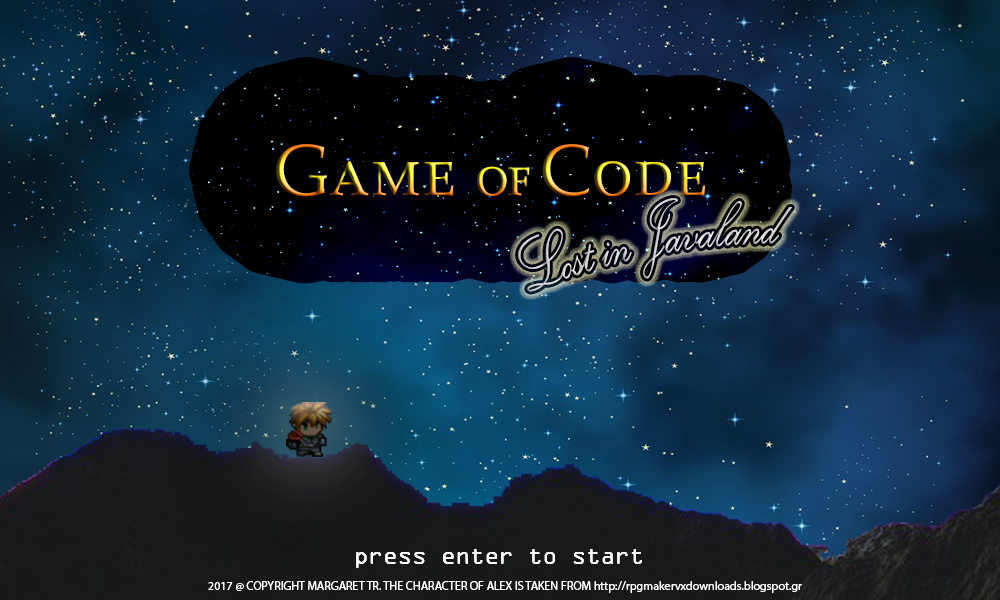
<style>
.page{position:relative;width:1000px;height:600px}
.page>*{position:absolute;margin:0}
.t1{font:72px "PalatinoLinotype-Roman";font-variant:small-caps}
.t2{font:60px "PalatinoLinotype-Roman";letter-spacing:-0.05em;font-variant:small-caps}
.t3{font:48px "KunstlerScript";color:#d4d4d4}
.t4{font:24px "OCRAExtended";color:#fdfbfb}
.t5{font:12px "MyriadPro-Regular";color:#ffffff}
</style>
<div class="page">
<p class="t1" style="left:276px;top:144px;width:429px;height:53px">Game <span class="t2">of </span>Code</p>
<p class="t3" style="left:518px;top:198px;width:274px;height:94px">Lost in Javaland</p>
<p class="t4" style="left:356px;top:549px;width:286px;height:19px">press enter to start</p>
<p class="t4" style="left:356px;top:549px;width:286px;height:19px">press enter to start</p>
<p class="t5" style="left:208px;top:581px;width:594px;height:12px">2017 @ COPYRIGHT MARGARET TR. THE CHARACTER OF ALEX IS TAKEN FROM http://rpgmakervxdownloads.blogspot.gr</p>
</div>
